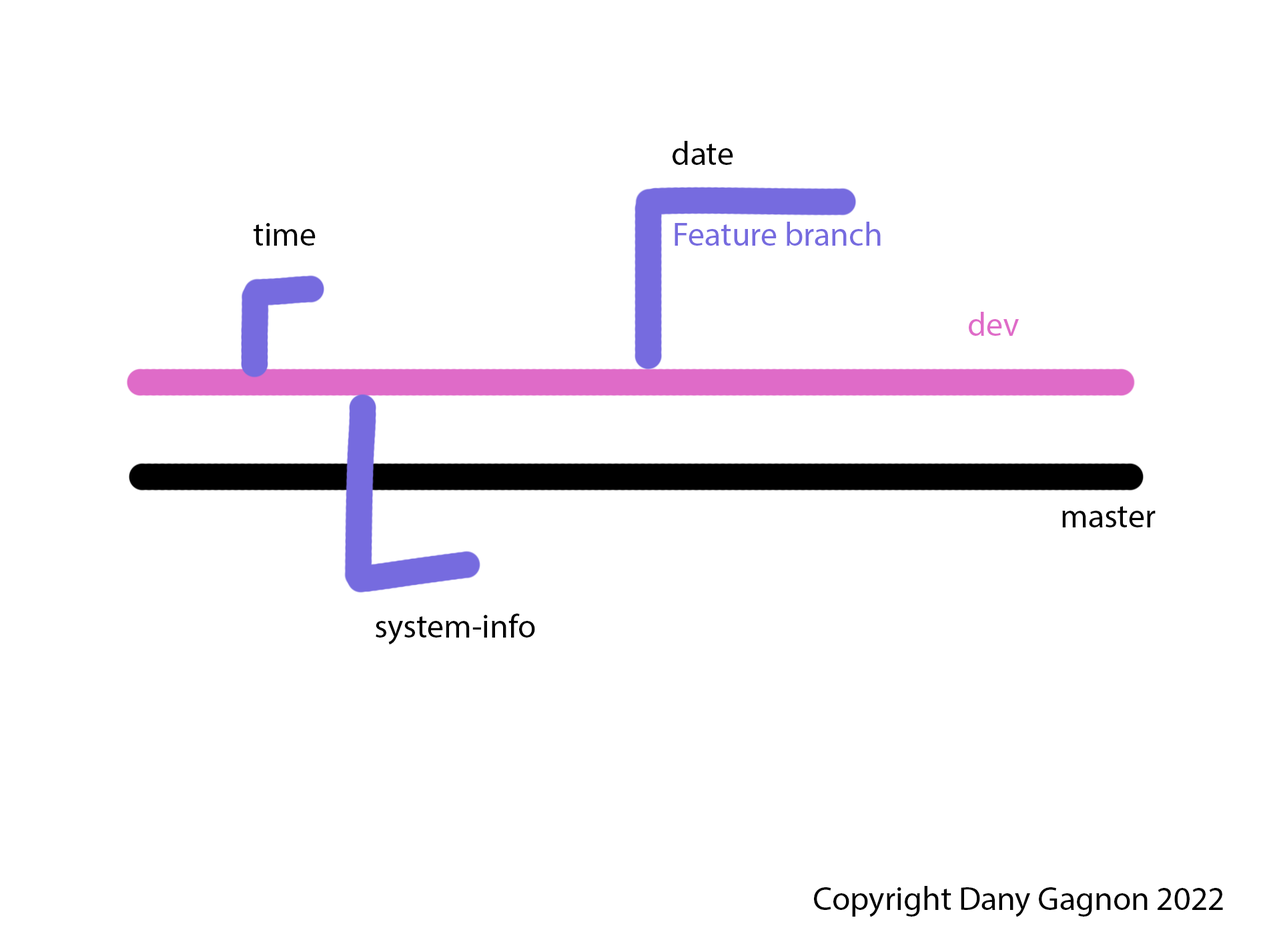
<style>
.page{position:relative;width:1261px;height:946px;background:#ffffff}
.page>*{position:absolute;margin:0}
.t1{font:33.4px "MyriadPro-Regular";color:#000000}
.t2{font:33.4px "MyriadPro-Regular";color:#766bdf}
.t3{font:33.4px "MyriadPro-Regular";color:#df6bc8}
</style>
<div class="page">
<p class="t1" style="left:673px;top:141px;width:60px;height:24px">date</p>
<p class="t2" style="left:675px;top:222px;width:206px;height:24px">Feature branch</p>
<p class="t1" style="left:254px;top:223px;width:62px;height:23px">time</p>
<p class="t3" style="left:969px;top:312px;width:50px;height:24px">dev</p>
<p class="t1" style="left:1062px;top:506px;width:94px;height:21px">master</p>
<p class="t1" style="left:376px;top:613px;width:159px;height:32px">system-info</p>
<p class="t1" style="left:814px;top:885px;width:409px;height:32px">Copyright Dany Gagnon 2022</p>
</div>
